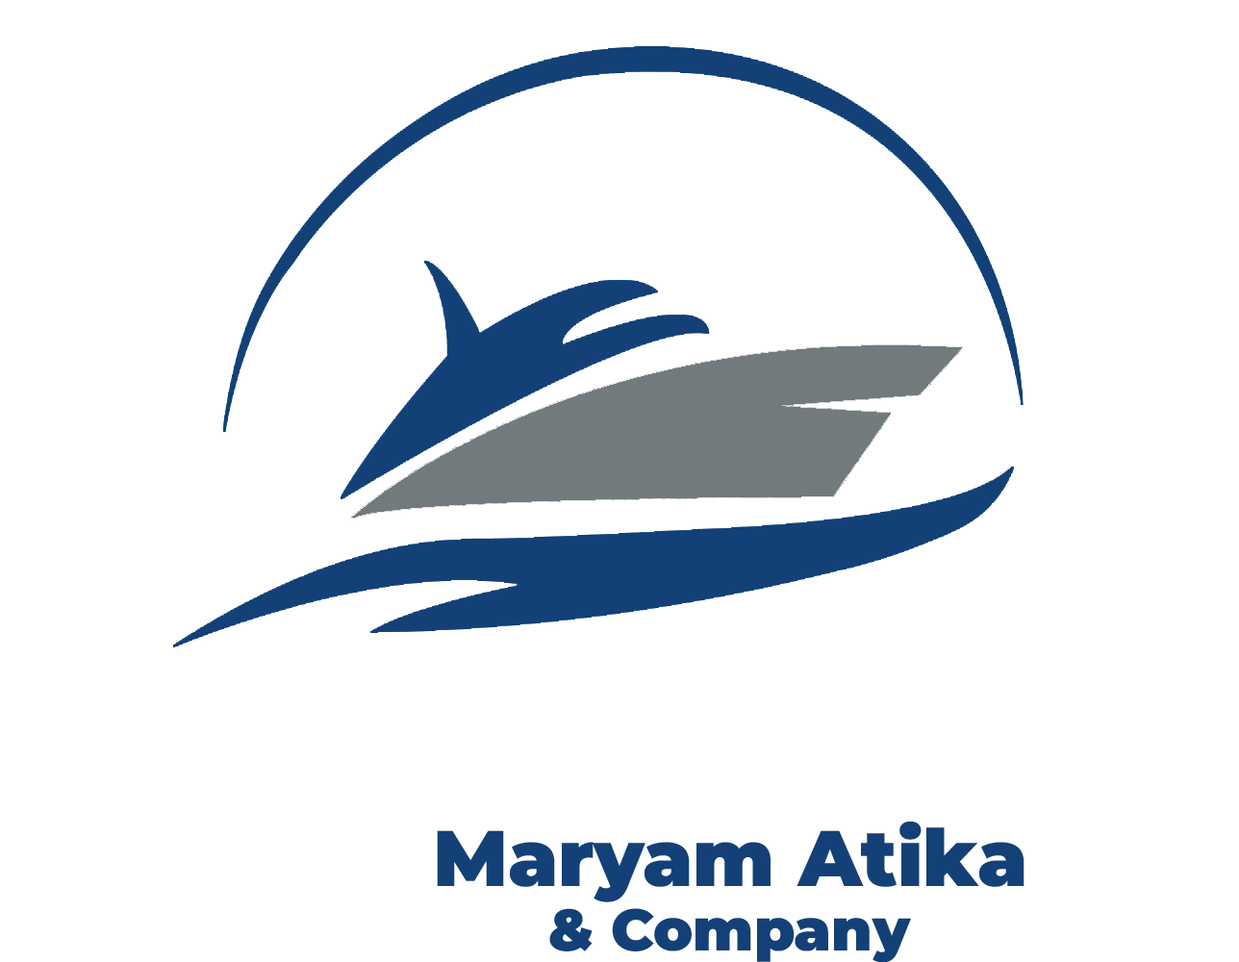
<style>
.page{position:relative;width:1239px;height:962px;background:#ffffff}
.page>*{position:absolute;margin:0}
.t1{font:78.6px "Montserrat-Black";color:#134077}
.t2{font:58.5px "Montserrat-Black";color:#134077}
</style>
<div class="page">
<p class="t1" style="left:437px;top:822px;width:588px;height:81px">Maryam Atika</p>
<p class="t2" style="left:549px;top:908px;width:362px;height:55px">&amp; Company</p>
</div>
